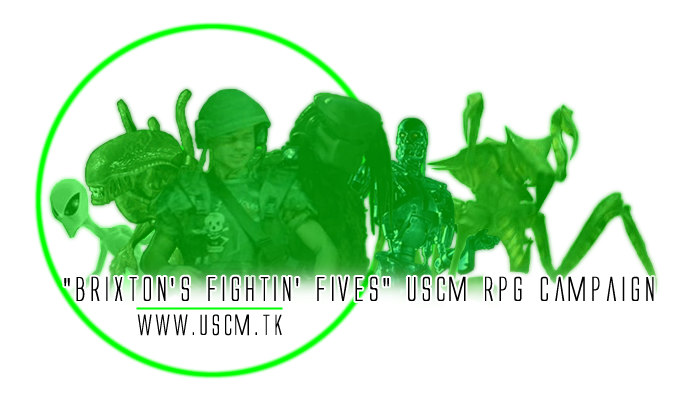
<style>
.page{position:relative;width:700px;height:400px;background:#ffffff}
.page>*{position:absolute;margin:0}
.t1{font:32px "AlienLeague";color:#000000}
.t2{font:27px "AlienLeague";color:#000000}
</style>
<div class="page">
<p class="t1" style="left:64px;top:276px;width:590px;height:25px">“BRiXTON’S FiGHTiN’ FiVES” USCM RPG CaMPaiGN</p>
<p class="t2" style="left:137px;top:314px;width:145px;height:22px">WWW.USCM.TK</p>
</div>
